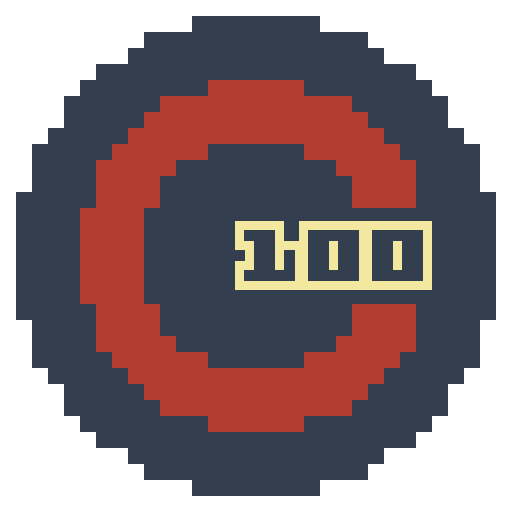
<style>
.page{position:relative;width:512px;height:512px;background:#333f4f}
.page>*{position:absolute;margin:0}
.t1{font:96px "OrigamiMommy";letter-spacing:-0.175em;color:#f2e8a0}
</style>
<div class="page">
<p class="t1" style="left:235px;top:221px;width:197px;height:69px">100</p>
</div>
